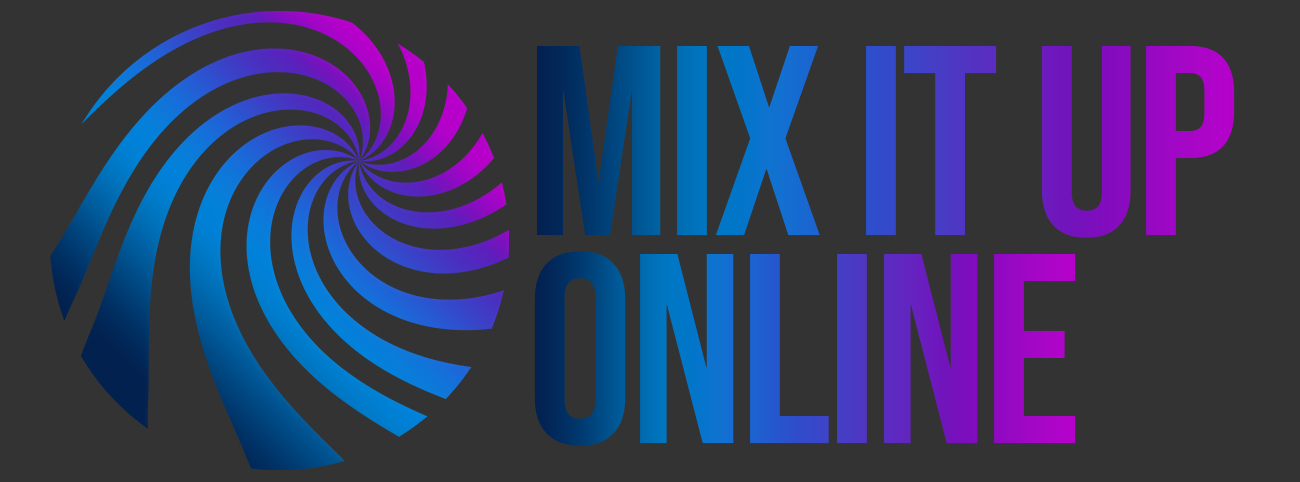
<style>
.page{position:relative;width:1300px;height:482px;background:#333333}
.page>*{position:absolute;margin:0}
.t1{font:270px "BebasNeue-Regular";letter-spacing:-0.02em}
</style>
<div class="page">
<p class="t1" style="left:537px;top:46px;width:698px;height:192px">Mix It Up</p>
<p class="t1" style="left:534px;top:251px;width:542px;height:195px">Online</p>
</div>
